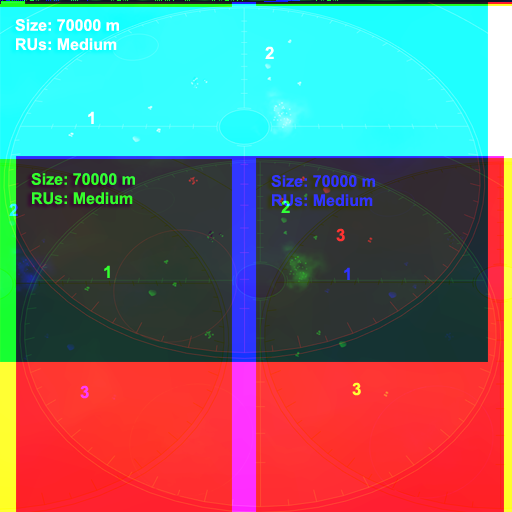
<style>
.page{position:relative;width:512px;height:512px}
.page>*{position:absolute;margin:0}
.t1{font:16px "Arial-BoldMT"}
.t2{font:17px "Arial-BoldMT"}
</style>
<div class="page">
<p class="t1" style="left:15px;top:17px;width:104px;height:32px">Size: 70000 m<br>RUs: Medium</p>
<p class="t2" style="left:88px;top:109px;width:6px;height:13px">1</p>
</div>
